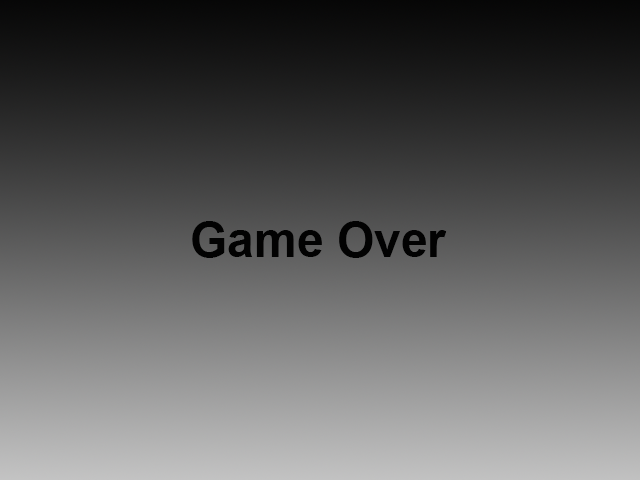
<style>
.page{position:relative;width:640px;height:480px}
.page>*{position:absolute;margin:0}
.t1{font:48px "Arial-BoldMT";color:#020202}
</style>
<div class="page">
<p class="t1" style="left:192px;top:221px;width:255px;height:37px">Game Over</p>
</div>
